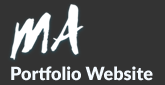
<style>
.page{position:relative;width:165px;height:85px;background:#333333}
.page>*{position:absolute;margin:0}
.t1{font:18px "Lato-ExtraBold";color:#f4faff}
</style>
<div class="page">
<p class="t1" style="left:11px;top:66px;width:142px;height:15px">Portfolio Website</p>
</div>
